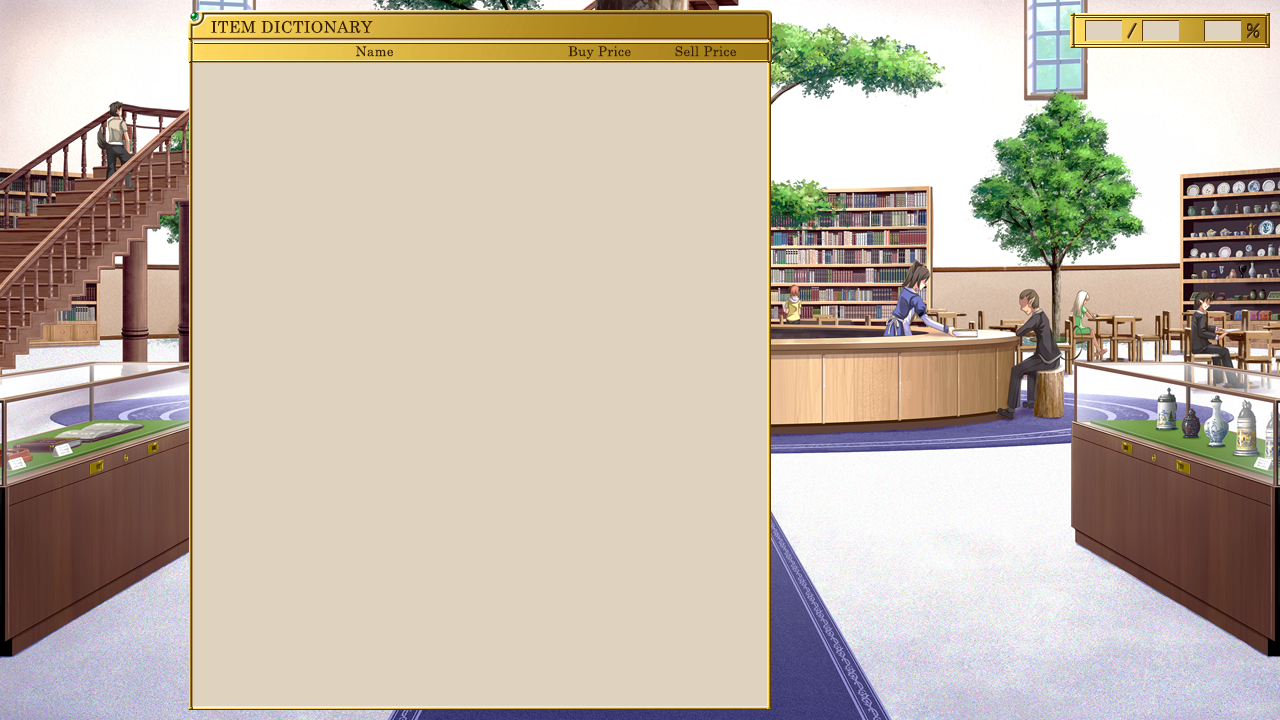
<style>
.page{position:relative;width:1280px;height:720px;background:#dfd3c0}
.page>*{position:absolute;margin:0}
.t1{font:16px "CenturySchoolbook";letter-spacing:0.025em;color:#382005}
.t2{font:13.3px "CenturySchoolbook";letter-spacing:0.025em;color:#382005}
</style>
<div class="page">
<p class="t1" style="left:211px;top:20px;width:162px;height:14px">ITEM DICTIONARY</p>
<p class="t2" style="left:356px;top:46px;width:37px;height:11px">Name</p>
<p class="t2" style="left:568px;top:46px;width:63px;height:13px">Buy Price</p>
<p class="t2" style="left:675px;top:46px;width:61px;height:11px">Sell Price</p>
</div>
